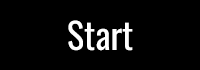
<style>
.page{position:relative;width:200px;height:70px;background:#000000}
.page>*{position:absolute;margin:0}
.t1{font:36px "Oswald-Regular";color:#ffffff}
</style>
<div class="page">
<p class="t1" style="left:68px;top:20px;width:65px;height:31px">Start</p>
</div>
